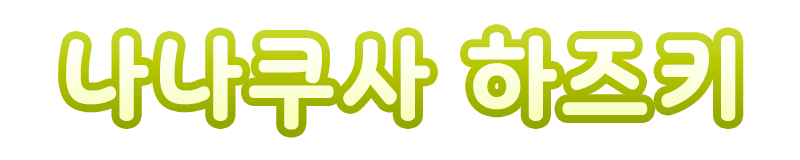
<style>
.page{position:relative;width:800px;height:160px;background:#ffffff}
.page>*{position:absolute;margin:0}
.t1{font:102.7px "Binggrae-Bold";letter-spacing:0.025em;text-transform:uppercase;scale:0.91 1}
</style>
<div class="page">
<p class="t1" style="left:66px;top:32px;width:670px;height:98px">나나쿠사 하즈키</p>
</div>
